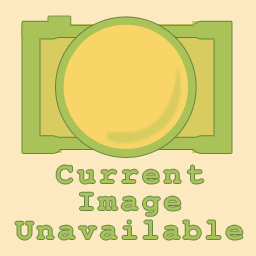
<style>
.page{position:relative;width:256px;height:256px;background:#fce9c0}
.page>*{position:absolute;margin:0}
.t1{font:30px/29px "CourierNewPS-BoldMT";letter-spacing:0.1em;color:#a9c358}
.t2{font:30px/28px "CourierNewPS-BoldMT";letter-spacing:0.12em;color:#a9c358}
.t3{font:30px/27px "CourierNewPS-BoldMT";letter-spacing:0.12em;color:#a9c358}
</style>
<div class="page">
<p class="t1" style="left:15px;top:165px;width:228px;height:75px;text-align:center"><span class="t2">Current<br></span><span class="t3">Image<br></span>Unavailable</p>
</div>
